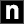
<style>
.page{position:relative;width:24px;height:24px;background:#000000}
.page>*{position:absolute;margin:0}
.t1{font:25.4px "Helvetica-Bold";color:#ffffff;scale:0.97 1}
</style>
<div class="page">
<p class="t1" style="left:6px;top:4px;width:13px;height:15px">n</p>
</div>
